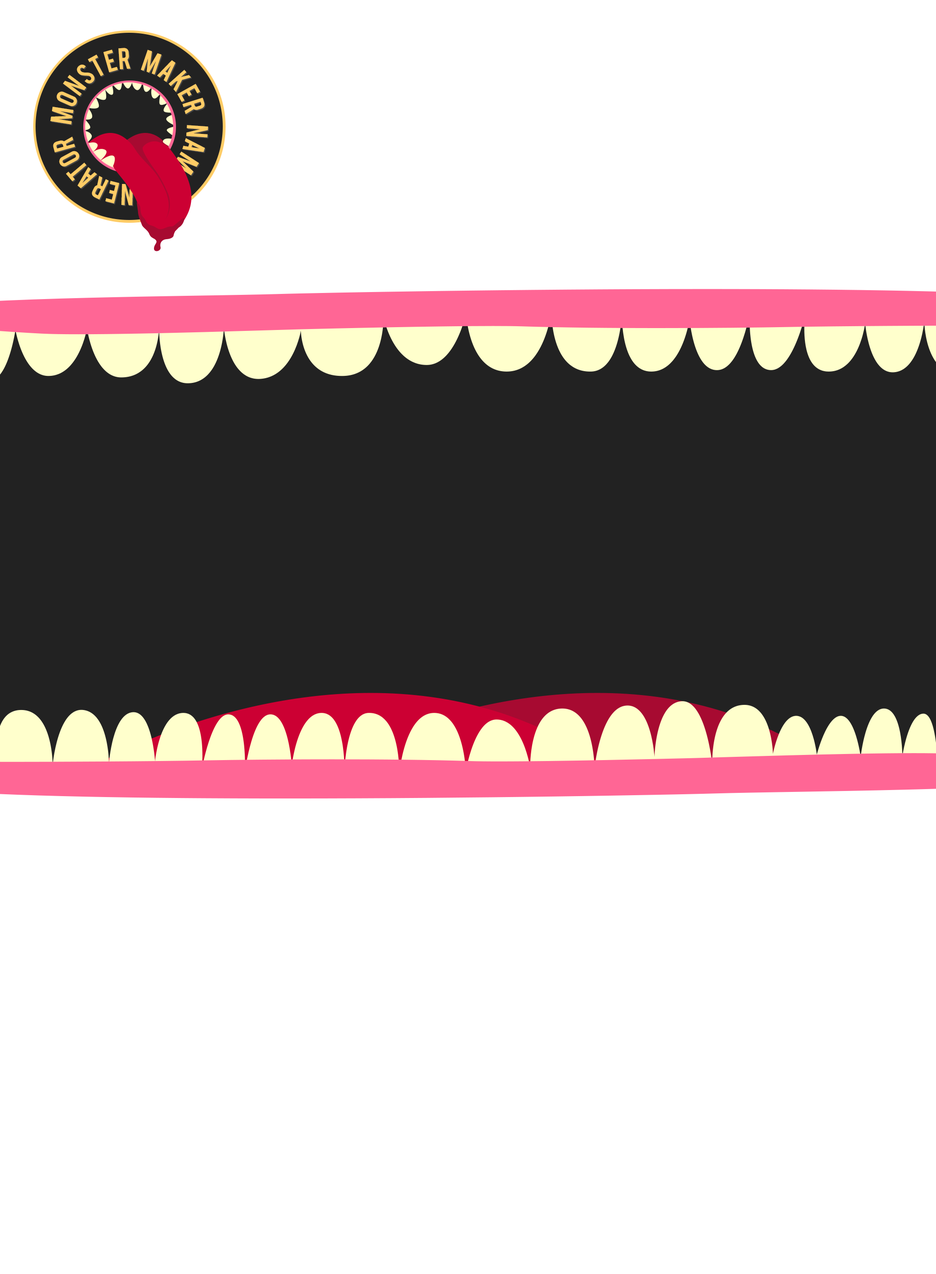
<style>
.page{position:relative;width:936px;height:1274px;background:#ffffff}
.page>*{position:absolute;margin:0}
.t1{font:23.4px "Bebas";color:#ffcc66}
.t2{font:23.4px "Bebas"}
</style>
<div class="page">
<p class="t1" style="left:50px;top:48px;width:158px;height:157px;rotate:153deg">Monster    Maker    Name    Generator</p>
<p class="t2" style="left:51px;top:49px;width:158px;height:157px;rotate:153deg">Monster    Maker    Name    Generator</p>
</div>
